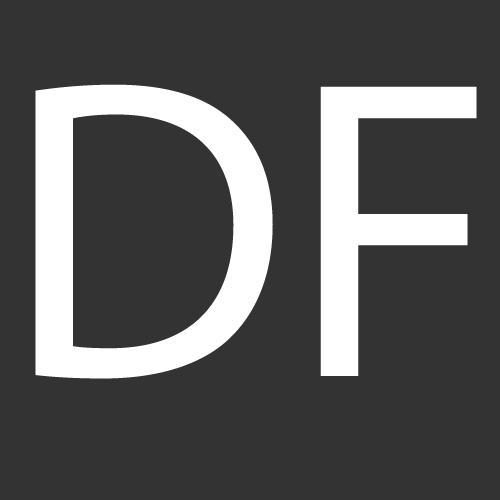
<style>
.page{position:relative;width:500px;height:500px;background:#333333}
.page>*{position:absolute;margin:0}
.t1{font:428.6px "MyriadPro-Regular";color:#ffffff}
</style>
<div class="page">
<p class="t1" style="left:35px;top:84px;width:442px;height:295px">DF</p>
</div>
